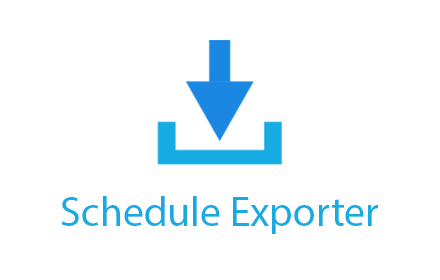
<style>
.page{position:relative;width:440px;height:280px;background:#ffffff}
.page>*{position:absolute;margin:0}
.t1{font:41.7px "MyriadPro-Regular";color:#17abe3}
</style>
<div class="page">
<p class="t1" style="left:61px;top:196px;width:317px;height:38px">Schedule Exporter</p>
</div>
